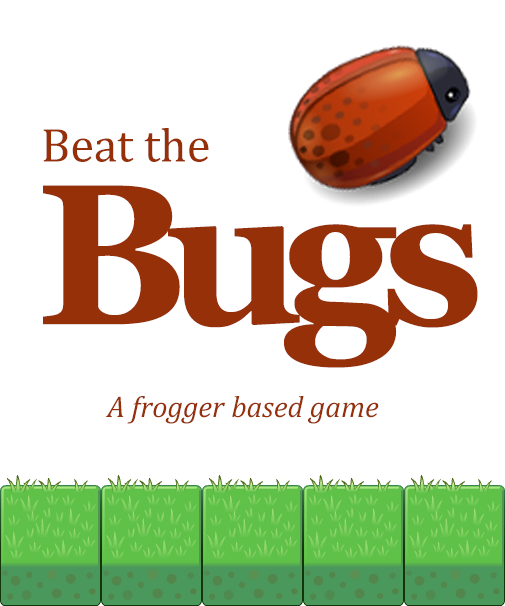
<style>
.page{position:relative;width:505px;height:606px;background:#ffffff}
.page>*{position:absolute;margin:0}
.t1{font:48px "Cambria";color:#963009}
.t2{font:200px "Georgia-Bold";letter-spacing:-0.075em;color:#963009}
.t3{font:30px "Cambria-Italic";color:#963009}
</style>
<div class="page">
<p class="t1" style="left:43px;top:128px;width:166px;height:34px">Beat the</p>
<p class="t2" style="left:43px;top:185px;width:435px;height:183px">Bugs</p>
<p class="t3" style="left:105px;top:396px;width:274px;height:28px">A frogger based game</p>
</div>
